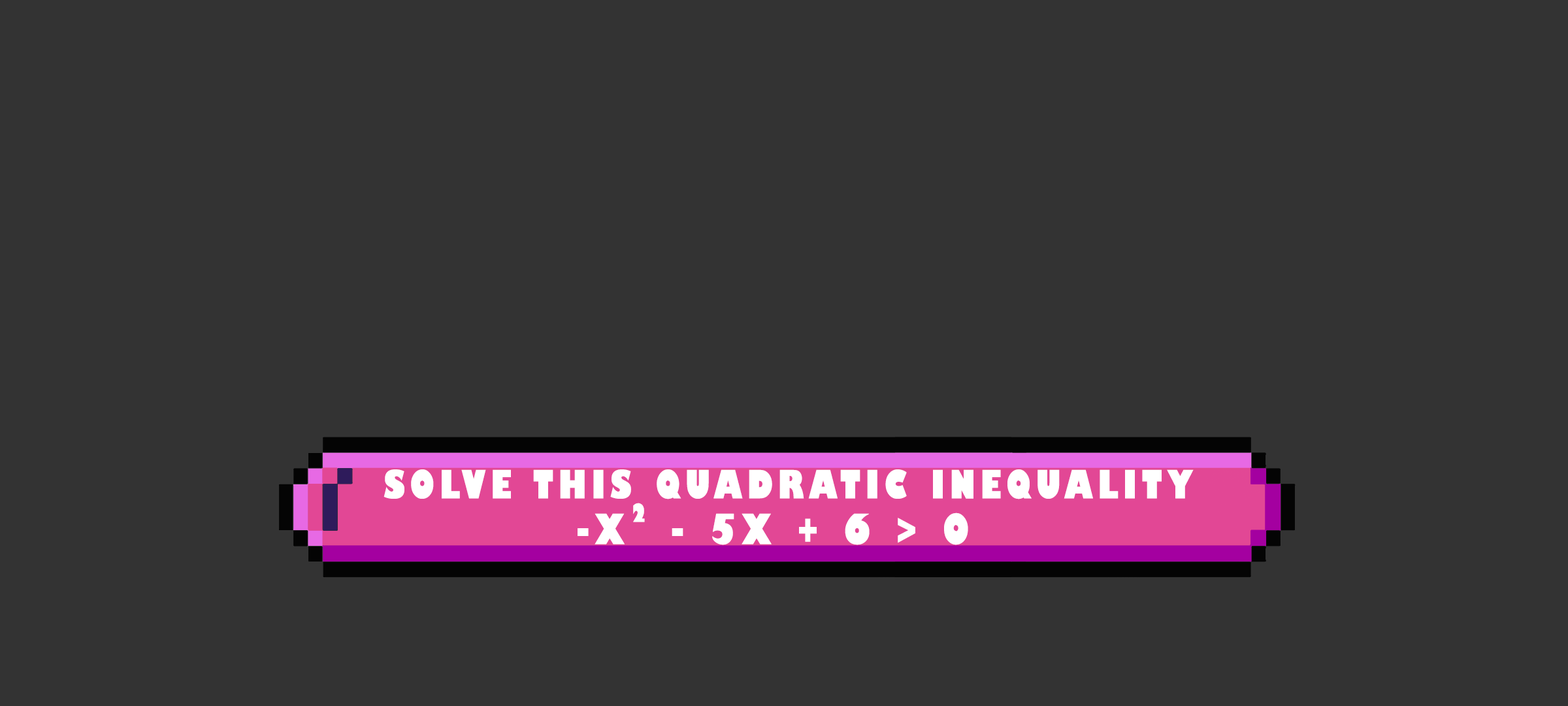
<style>
.page{position:relative;width:1568px;height:706px;background:#333333}
.page>*{position:absolute;margin:0}
.t1{font:38.1px "GillSans-UltraBoldCondensed";letter-spacing:0.115em;color:#ffffff;text-transform:uppercase;scale:1.12 1}
.t2{font:24.5px "GillSans-UltraBoldCondensed";letter-spacing:0.115em;color:#ffffff;text-transform:uppercase;scale:1.12 1}
.t3{font:40.8px "GillSans-UltraBoldCondensed";letter-spacing:0.115em;color:#ffffff;text-transform:uppercase;scale:1.12 1}
</style>
<div class="page">
<p class="t1" style="left:384px;top:469px;width:810px;height:30px">solve this quadratic inequality</p>
<p class="t2" style="left:633px;top:502px;width:12px;height:20px">2</p>
<p class="t3" style="left:578px;top:512px;width:390px;height:33px">-x  - 5x + 6 &gt; 0</p>
</div>
